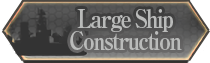
<style>
.page{position:relative;width:210px;height:63px}
.page>*{position:absolute;margin:0}
.t1{font:25px/22px "RyuminPro-ExBold";letter-spacing:-0.08em;color:#babbba;scale:0.87 1}
</style>
<div class="page">
<p class="t1" style="left:70px;top:9px;width:112px;height:42px;text-align:center">Large Ship <br>Construction</p>
</div>
